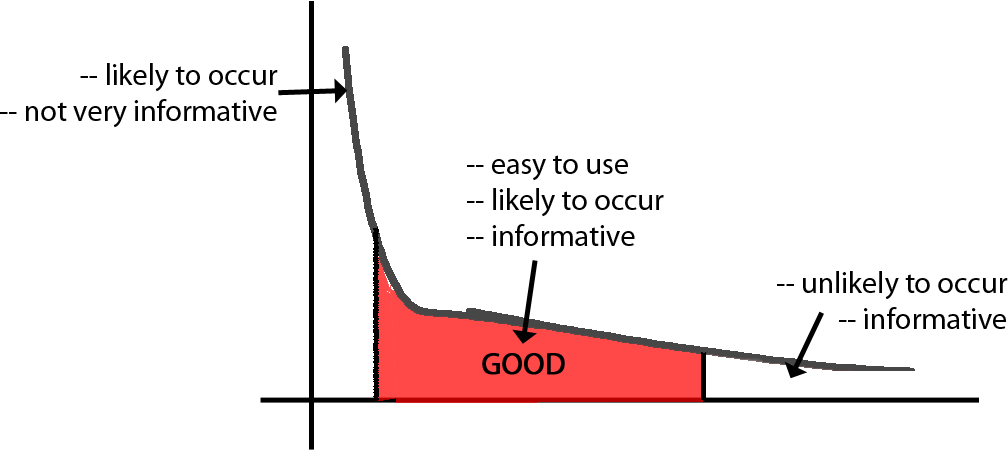
<style>
.page{position:relative;width:1008px;height:451px;background:#ffffff}
.page>*{position:absolute;margin:0}
.t1{font:30px "MyriadPro-Regular";color:#000000}
.t2{font:30px "MyriadPro-Regular";color:#000000;font-weight:bold}
</style>
<div class="page">
<p class="t1" style="left:0px;top:63px;width:278px;height:65px;text-align:right">-- likely to occur<br>-- not very informative</p>
<p class="t1" style="left:467px;top:155px;width:197px;height:91px">-- easy to use<br>-- likely to occur<br>-- informative</p>
<p class="t1" style="left:777px;top:271px;width:231px;height:58px;text-align:right">-- unlikely to occur<br>-- informative</p>
<p class="t2" style="left:482px;top:353px;width:83px;height:22px">GOOD</p>
</div>
